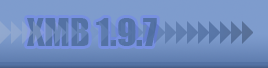
<style>
.page{position:relative;width:268px;height:68px;background:#7e9ccd}
.page>*{position:absolute;margin:0}
.t1{font:36px "Impact";color:#5472a4}
</style>
<div class="page">
<p class="t1" style="left:27px;top:18px;width:130px;height:28px">XMB 1.9.7</p>
</div>
